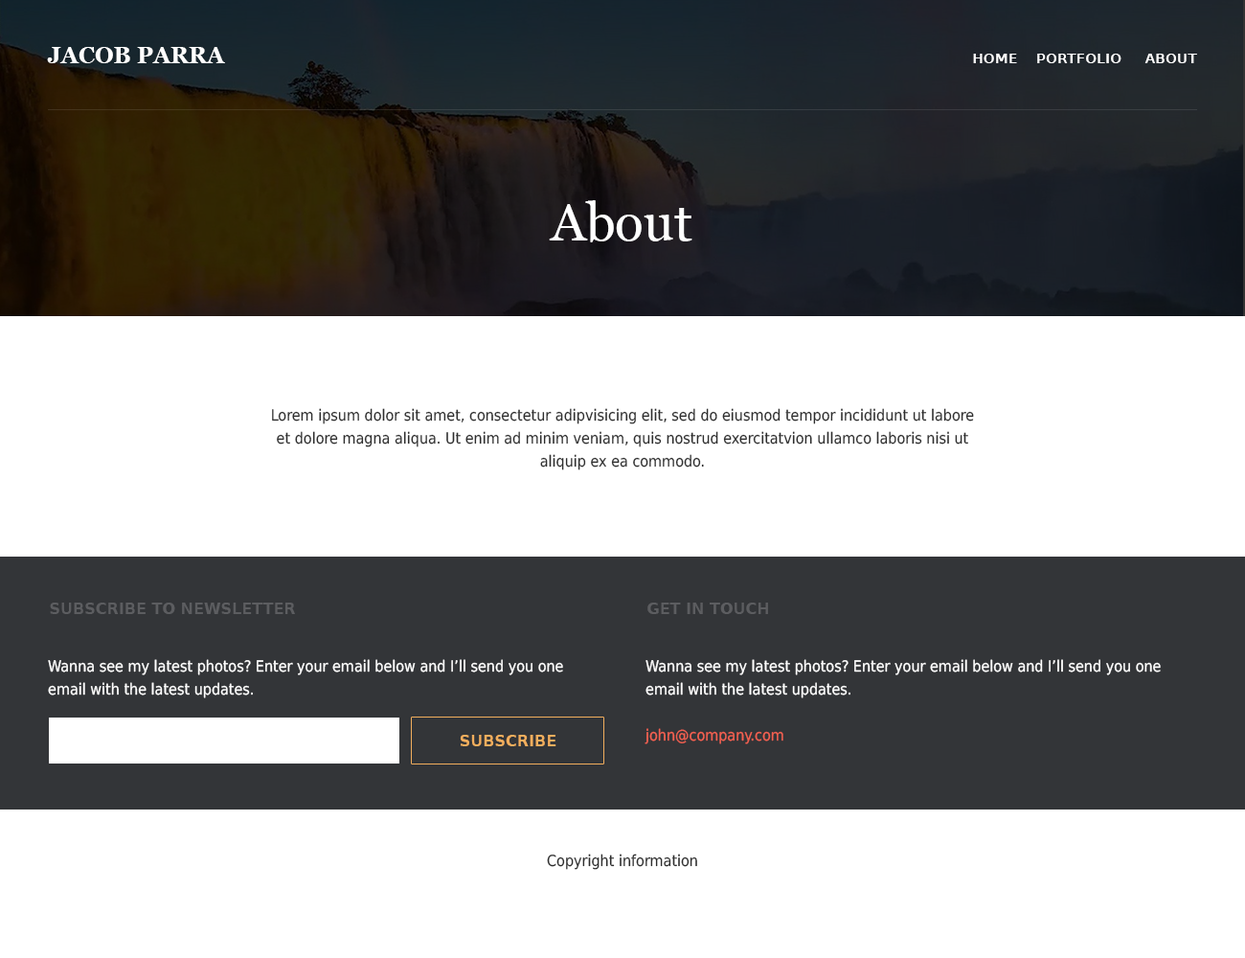
<style>
.page{position:relative;width:1245px;height:958px;background:#ffffff}
.page>*{position:absolute;margin:0}
.t1{font:23px "Georgia-Bold";color:#ffffff;text-transform:uppercase}
.t2{font:13.4px "DejaVuSans-Bold";color:#ffffff;text-transform:uppercase}
.t3{font:52.7px "Georgia";color:#ffffff}
.t4{font:15.3px/23px "DejaVuSansCondensed";color:#2e2e2e}
.t5{font:15.3px "DejaVuSans-Bold";color:#5c5d60;text-transform:uppercase}
.t6{font:15.3px/23px "DejaVuSansCondensed";color:#ffffff}
.t7{font:15.3px/23px "DejaVuSansCondensed";color:#f46151}
.t8{font:15.3px "DejaVuSans-Bold";color:#f2ae5d;text-transform:uppercase}
.t9{font:15.3px "DejaVuSansCondensed";color:#2e2e2e}
</style>
<div class="page">
<p class="t1" style="left:47px;top:47px;width:178px;height:16px">Jacob Parra</p>
<p class="t2" style="left:973px;top:54px;width:224px;height:9px">HOME    PORTFOLIO     ABOUT</p>
<p class="t3" style="left:549px;top:200px;width:143px;height:42px">About</p>
<p class="t4" style="left:272px;top:408px;width:702px;height:62px;text-align:center">Lorem ipsum dolor sit amet, consectetur adipvisicing elit, sed do eiusmod tempor incididunt ut labore et dolore magna aliqua. Ut enim ad minim veniam, quis nostrud exercitatvion ullamco laboris nisi ut aliquip ex ea commodo.</p>
<p class="t5" style="left:50px;top:602px;width:245px;height:12px">Subscribe to newsletter</p>
<p class="t5" style="left:647px;top:602px;width:121px;height:12px">Get in Touch</p>
<p class="t6" style="left:48px;top:659px;width:515px;height:39px">Wanna see my latest photos? Enter your email below and I’ll send you one email with the latest updates.</p>
<p class="t6" style="left:645px;top:659px;width:516px;height:85px">Wanna see my latest photos? Enter your email below and I’ll send you one email with the latest updates.<br><br><span class="t7">john@company.com</span></p>
<p class="t8" style="left:460px;top:735px;width:96px;height:11px">Subscribe</p>
<p class="t9" style="left:547px;top:853px;width:150px;height:17px">Copyright information</p>
</div>
